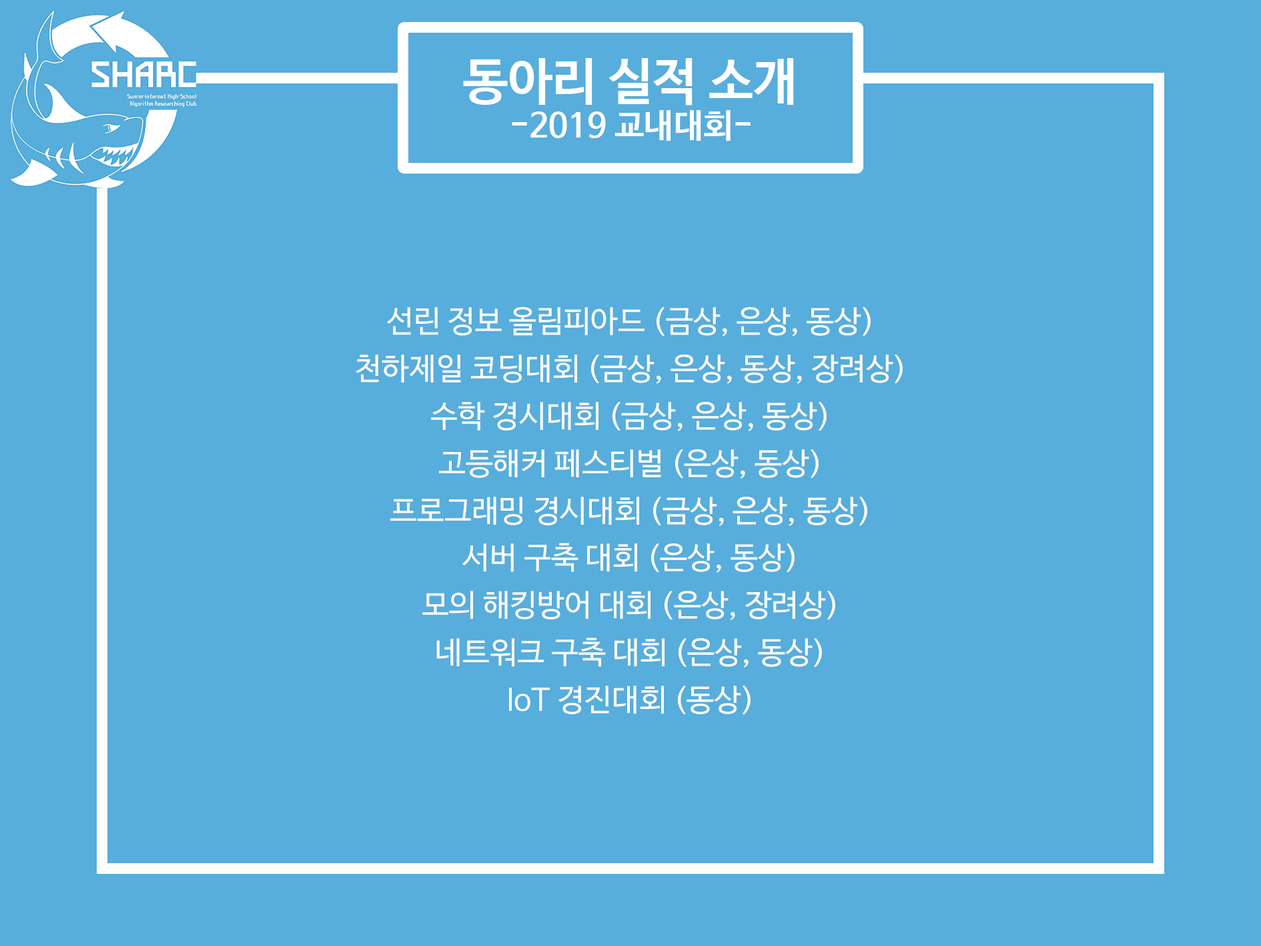
<style>
.page{position:relative;width:1261px;height:946px;background:#57addb}
.page>*{position:absolute;margin:0}
.t1{font:50px "NanumBarunGothicBold";color:#ffffff}
.t2{font:33.4px "NanumBarunGothicBold";color:#ffffff}
.t3{font:30.6px/47.3px "NanumBarunGothic";color:#ffffff}
</style>
<div class="page">
<p class="t1" style="left:463px;top:58px;width:331px;height:47px">동아리 실적 소개</p>
<p class="t2" style="left:512px;top:110px;width:239px;height:31px">-2019 교내대회-</p>
<p class="t3" style="left:356px;top:307px;width:547px;height:407px;text-align:center">선린 정보 올림피아드 (금상, 은상, 동상)<br>천하제일 코딩대회 (금상, 은상, 동상, 장려상)<br>수학 경시대회 (금상, 은상, 동상)<br>고등해커 페스티벌 (은상, 동상)<br>프로그래밍 경시대회 (금상, 은상, 동상)<br>서버 구축 대회 (은상, 동상)<br>모의 해킹방어 대회 (은상, 장려상)<br>네트워크 구축 대회 (은상, 동상)<br>IoT 경진대회 (동상)</p>
</div>
